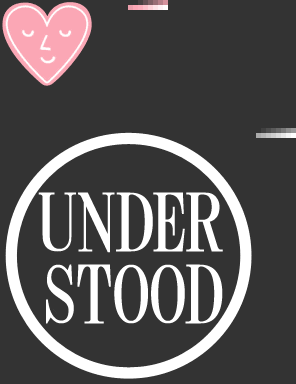
<style>
.page{position:relative;width:296px;height:384px;background:#333333}
.page>*{position:absolute;margin:0}
.t1{font:80px/72px "HGMinchoB";letter-spacing:-0.025em;color:#ffffff}
</style>
<div class="page">
<p class="t1" style="left:38px;top:192px;width:185px;height:132px;text-align:center">UNDER<br>STOOD</p>
</div>
